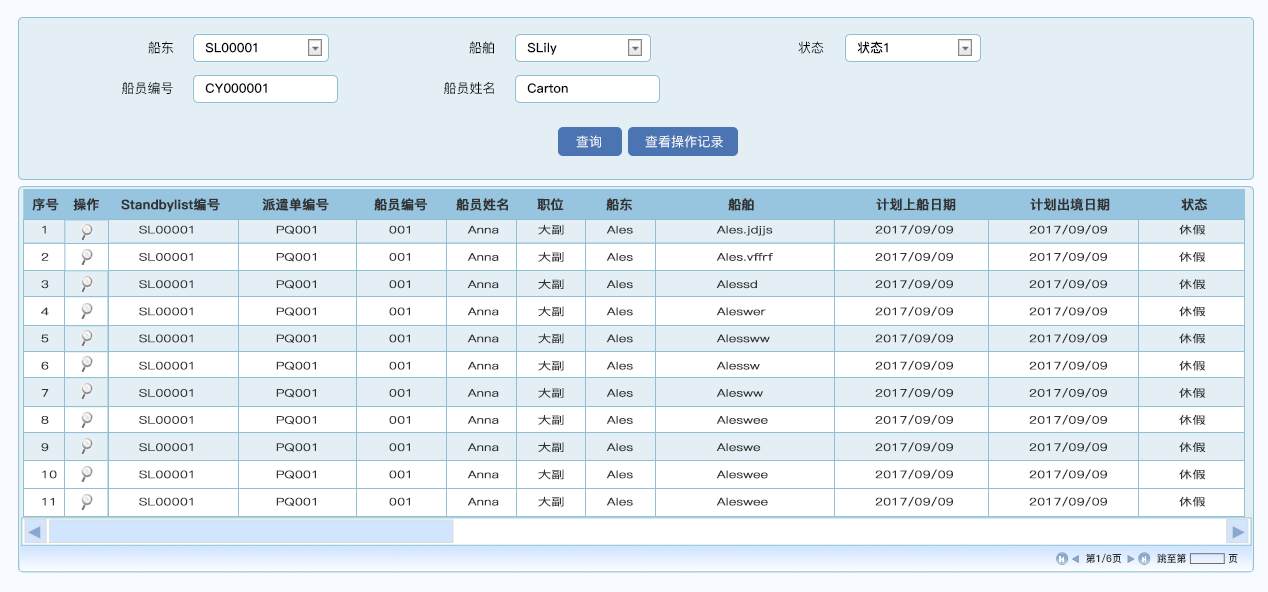
<style>
.page{position:relative;width:1268px;height:592px;background:#e3eff4}
.page>*{position:absolute;margin:0}
.t1{font:13.2px "PingFang-SC-Medium";color:#050505}
.t2{font:13px "PingFang-SC-Heavy";color:#050505}
.t3{font:13.2px "PingFang-SC-Medium";color:#ffffff}
.t4{font:13px "PingFang-SC-Bold";color:#323232;font-weight:bold}
.t5{font:13px "PingFang-SC-Bold";font-weight:bold}
.t6{font:10.4px/13.6px "PingFang-SC-Regular";color:#323232;font-weight:bold;scale:1.26 1}
.t7{font:10px "PingFang-SC-Heavy";color:#2d2e2e}
</style>
<div class="page">
<p class="t1" style="left:148px;top:41px;width:26px;height:13px">船东</p>
<p class="t1" style="left:469px;top:41px;width:25px;height:13px">船舶</p>
<p class="t1" style="left:798px;top:41px;width:26px;height:13px">状态</p>
<p class="t2" style="left:857px;top:41px;width:31px;height:13px">状态1</p>
<p class="t2" style="left:205px;top:42px;width:52px;height:11px">SL00001</p>
<p class="t2" style="left:527px;top:42px;width:30px;height:13px">SLily</p>
<p class="t1" style="left:122px;top:81px;width:51px;height:13px">船员编号</p>
<p class="t2" style="left:205px;top:83px;width:62px;height:10px">CY000001</p>
<p class="t1" style="left:444px;top:81px;width:50px;height:13px">船员姓名</p>
<p class="t2" style="left:527px;top:83px;width:41px;height:10px">Carton</p>
<p class="t3" style="left:576px;top:135px;width:25px;height:13px">查询</p>
<p class="t3" style="left:645px;top:135px;width:78px;height:13px">查看操作记录</p>
<p class="t4" style="left:32px;top:198px;width:27px;height:13px">序号</p>
<p class="t4" style="left:73px;top:198px;width:26px;height:13px">操作</p>
<p class="t5" style="left:74px;top:198px;width:26px;height:13px">操作</p>
<p class="t4" style="left:121px;top:198px;width:99px;height:14px">Standbylist编号</p>
<p class="t4" style="left:262px;top:198px;width:67px;height:13px">派遣单编号</p>
<p class="t4" style="left:374px;top:198px;width:53px;height:13px">船员编号</p>
<p class="t4" style="left:456px;top:198px;width:52px;height:13px">船员姓名</p>
<p class="t4" style="left:537px;top:198px;width:27px;height:13px">职位</p>
<p class="t4" style="left:606px;top:198px;width:27px;height:13px">船东</p>
<p class="t4" style="left:728px;top:198px;width:26px;height:13px">船舶</p>
<p class="t4" style="left:876px;top:198px;width:80px;height:13px">计划上船日期</p>
<p class="t4" style="left:1030px;top:198px;width:80px;height:13px">计划出境日期</p>
<p class="t4" style="left:1181px;top:198px;width:27px;height:13px">状态</p>
<p class="t6" style="left:41px;top:225px;width:16px;height:281px">1<br><br>2<br><br>3<br><br>4<br><br>5<br><br>6<br><br>7<br><br>8<br><br>9<br><br>10<br><br>11</p>
<p class="t6" style="left:139px;top:225px;width:54px;height:281px">SL00001<br><br>SL00001<br><br>SL00001<br><br>SL00001<br><br>SL00001<br><br>SL00001<br><br>SL00001<br><br>SL00001<br><br>SL00001<br><br>SL00001<br><br>SL00001</p>
<p class="t6" style="left:276px;top:225px;width:40px;height:282px">PQ001<br><br>PQ001<br><br>PQ001<br><br>PQ001<br><br>PQ001<br><br>PQ001<br><br>PQ001<br><br>PQ001<br><br>PQ001<br><br>PQ001<br><br>PQ001</p>
<p class="t6" style="left:389px;top:225px;width:21px;height:281px">001<br><br>001<br><br>001<br><br>001<br><br>001<br><br>001<br><br>001<br><br>001<br><br>001<br><br>001<br><br>001</p>
<p class="t6" style="left:467px;top:225px;width:32px;height:281px">Anna<br><br>Anna<br><br>Anna<br><br>Anna<br><br>Anna<br><br>Anna<br><br>Anna<br><br>Anna<br><br>Anna<br><br>Anna<br><br>Anna</p>
<p class="t6" style="left:538px;top:224px;width:26px;height:283px">大副<br><br>大副<br><br>大副<br><br>大副<br><br>大副<br><br>大副<br><br>大副<br><br>大副<br><br>大副<br><br>大副<br><br>大副</p>
<p class="t6" style="left:606px;top:225px;width:27px;height:281px">Ales<br><br>Ales<br><br>Ales<br><br>Ales<br><br>Ales<br><br>Ales<br><br>Ales<br><br>Ales<br><br>Ales<br><br>Ales<br><br>Ales</p>
<p class="t6" style="left:716px;top:225px;width:57px;height:281px">Ales.jdjjs<br><br>Ales.vffrf<br><br>Alessd<br><br>Aleswer<br><br>Alessww<br><br>Alessw<br><br>Alesww<br><br>Aleswee<br><br>Aleswe<br><br>Aleswee<br><br>Aleswee</p>
<p class="t6" style="left:875px;top:224px;width:78px;height:283px">2017/09/09<br><br>2017/09/09<br><br>2017/09/09<br><br>2017/09/09<br><br>2017/09/09<br><br>2017/09/09<br><br>2017/09/09<br><br>2017/09/09<br><br>2017/09/09<br><br>2017/09/09<br><br>2017/09/09</p>
<p class="t6" style="left:1029px;top:224px;width:78px;height:283px">2017/09/09<br><br>2017/09/09<br><br>2017/09/09<br><br>2017/09/09<br><br>2017/09/09<br><br>2017/09/09<br><br>2017/09/09<br><br>2017/09/09<br><br>2017/09/09<br><br>2017/09/09<br><br>2017/09/09</p>
<p class="t6" style="left:1179px;top:224px;width:27px;height:283px">休假<br><br>休假<br><br>休假<br><br>休假<br><br>休假<br><br>休假<br><br>休假<br><br>休假<br><br>休假<br><br>休假<br><br>休假</p>
<p class="t7" style="left:1086px;top:553px;width:36px;height:10px">第1/6页</p>
<p class="t7" style="left:1157px;top:553px;width:81px;height:10px">跳至第             页</p>
</div>
